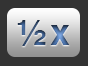
<style>
.page{position:relative;width:88px;height:66px;background:#333333}
.page>*{position:absolute;margin:0}
.t1{font:36px "Helvetica-Bold"}
</style>
<div class="page">
<p class="t1" style="left:17px;top:20px;width:29px;height:26px">½</p>
<p class="t1" style="left:50px;top:25px;width:20px;height:20px">x</p>
</div>
